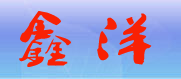
<style>
.page{position:relative;width:181px;height:79px}
.page>*{position:absolute;margin:0}
.t1{font:55px "Ò¶¸ùÓÑÐÐÊé·±";color:#f92104;scale:1.2 1}
</style>
<div class="page">
<p class="t1" style="left:19px;top:11px;width:133px;height:56px">鑫 洋</p>
</div>
